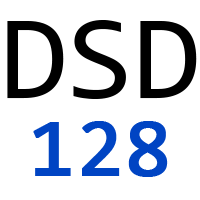
<style>
.page{position:relative;width:200px;height:200px;background:#ffffff}
.page>*{position:absolute;margin:0}
.t1{font:120.8px "Consolas";color:#000000}
.t2{font:83.3px "Consolas";color:#0044c3;font-weight:bold}
</style>
<div class="page">
<p class="t1" style="left:7px;top:20px;width:190px;height:79px">DSD</p>
<p class="t2" style="left:33px;top:121px;width:135px;height:56px">128</p>
</div>
